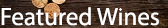
<style>
.page{position:relative;width:168px;height:28px}
.page>*{position:absolute;margin:0}
.t1{font:25px "MyriadPro-Regular";color:#ffffff}
</style>
<div class="page">
<p class="t1" style="left:1px;top:7px;width:158px;height:19px">Featured Wines</p>
</div>
